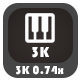
<style>
.page{position:relative;width:80px;height:80px;background:#464646}
.page>*{position:absolute;margin:0}
.t1{font:15px "Bauhaus93";color:#ffffff}
.t2{font:12px "Bauhaus93";color:#ffffff}
</style>
<div class="page">
<p class="t1" style="left:32px;top:47px;width:17px;height:11px">3K</p>
<p class="t2" style="left:16px;top:65px;width:48px;height:10px">3K 0.74x</p>
</div>
